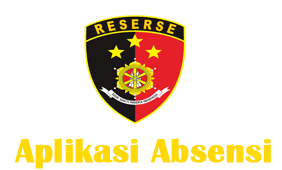
<style>
.page{position:relative;width:282px;height:170px;background:#ffffff}
.page>*{position:absolute;margin:0}
.t1{font:34.1px "BritannicBold";color:#ffd808;font-weight:bold}
</style>
<div class="page">
<p class="t1" style="left:14px;top:138px;width:257px;height:31px">Aplikasi Absensi</p>
</div>
